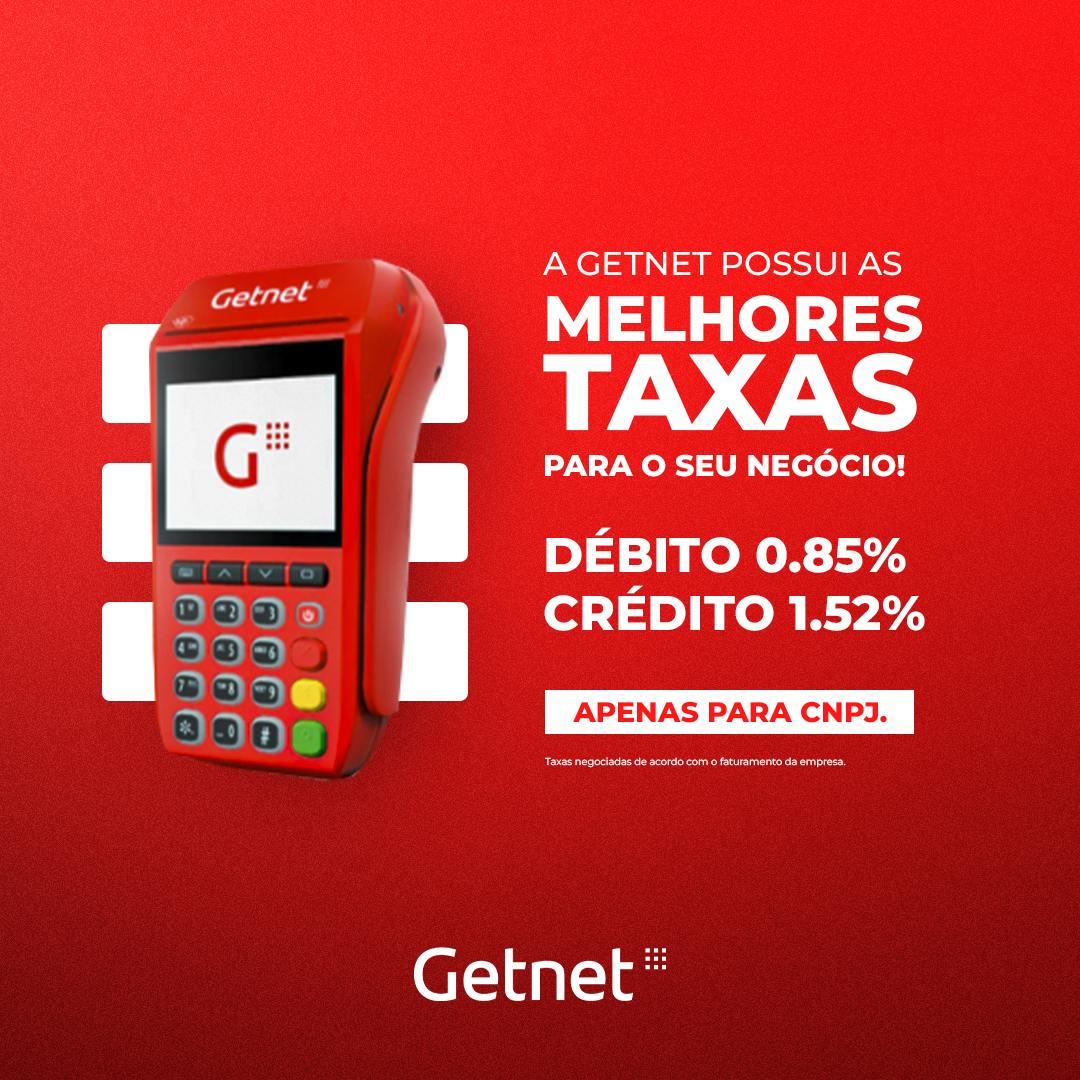
<style>
.page{position:relative;width:1080px;height:1080px}
.page>*{position:absolute;margin:0}
.t1{font:29.8px/45.4px "Montserrat-ExtraBold";color:#ffffff;text-transform:uppercase}
.t2{font:33px/39.2px "Montserrat-Medium";color:#ffffff;text-transform:uppercase}
.t3{font:64px/66px "Montserrat-ExtraBold";color:#ffffff;text-transform:uppercase}
.t4{font:107.9px/89.5px "Montserrat-ExtraBold";color:#ffffff;text-transform:uppercase}
.t5{font:48.6px "Montserrat-ExtraBold";color:#ffffff;text-transform:uppercase}
.t6{font:28.3px "Montserrat-ExtraBold";color:#ff1615;text-transform:uppercase}
.t7{font:9.9px "Montserrat-Regular";color:#ffffff}
</style>
<div class="page">
<p class="t1" style="left:543px;top:251px;width:379px;height:226px"><span class="t2">A Getnet possui as<br></span><span class="t3">melhores<br></span><span class="t4">taxas<br></span>para o seu negócio!</p>
<p class="t5" style="left:544px;top:527px;width:381px;height:104px">Débito 0.85% <br>crédito 1.52%</p>
<p class="t6" style="left:573px;top:701px;width:314px;height:22px">Apenas para CNPJ.</p>
<p class="t7" style="left:545px;top:757px;width:301px;height:11px">Taxas negociadas de acordo com o faturamento da empresa.</p>
</div>
